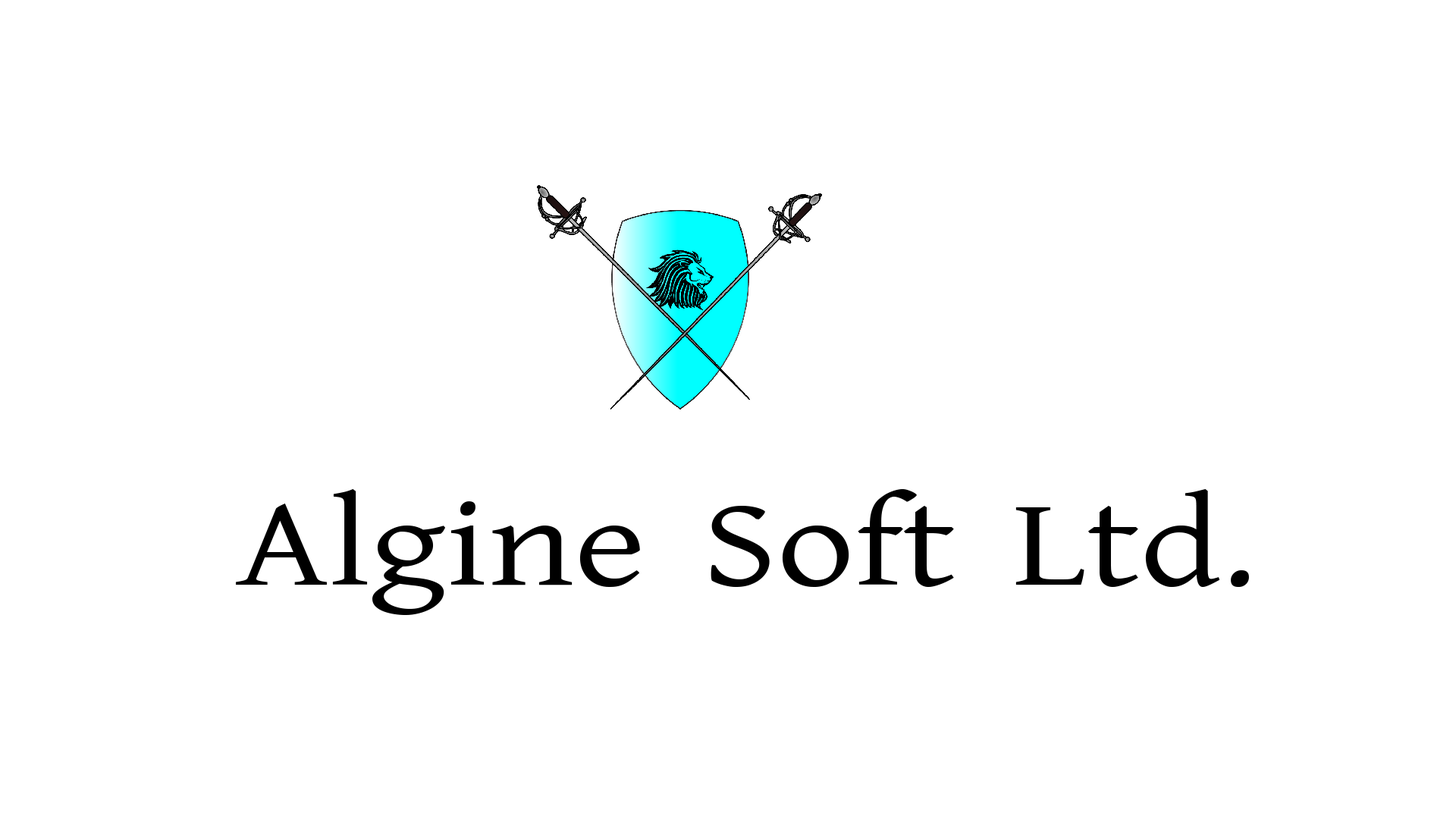
<style>
.page{position:relative;width:1456px;height:819px;background:#ffffff}
.page>*{position:absolute;margin:0}
.t1{font:125.5px "Kalpurush";color:#000000;scale:1.24 1}
</style>
<div class="page">
<p class="t1" style="left:236px;top:489px;width:1013px;height:126px">Algine Soft Ltd.</p>
</div>
